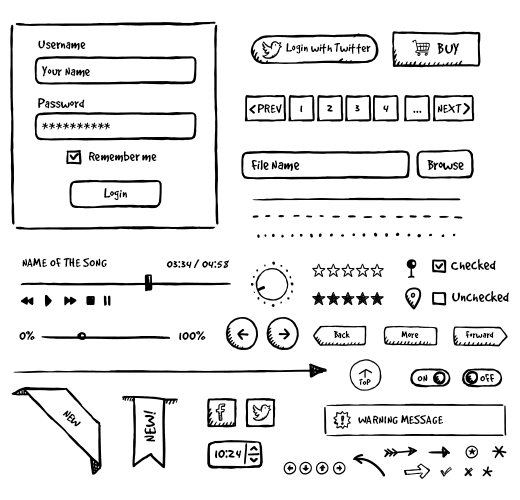
<style>
.page{position:relative;width:520px;height:500px;background:#ffffff}
.page>*{position:absolute;margin:0}
.t1{font:14.5px "GoodDog";color:#000000}
.t2{font:13.2px "GoodDog";letter-spacing:0.01em;color:#000000}
.t3{font:16.6px "GoodDog";letter-spacing:0.01em;color:#000000}
.t4{font:13.8px "GoodDog";letter-spacing:0.01em;color:#000000}
.t5{font:13.8px "GoodDog";letter-spacing:0.05em;color:#000000}
.t6{font:14.5px "GoodDog";letter-spacing:0.1em;color:#000000}
.t7{font:15.9px "GoodDog";color:#000000}
.t8{font:13.6px "GoodDog";letter-spacing:0.01em;color:#000000}
.t9{font:16.1px "GoodDog";letter-spacing:0.01em;color:#000000}
.t10{font:15.3px "GoodDog";color:#000000}
.t11{font:10px "GoodDog";letter-spacing:0.01em;color:#000000}
.t12{font:12px "GoodDog";color:#000000}
.t13{font:8.4px "GoodDog";letter-spacing:0.01em;color:#000000}
.t14{font:19.6px "GoodDog";color:#000000}
</style>
<div class="page">
<p class="t1" style="left:38px;top:40px;width:48px;height:10px">Username</p>
<p class="t2" style="left:286px;top:43px;width:85px;height:11px">Login with Twitter</p>
<p class="t3" style="left:437px;top:43px;width:23px;height:12px">BUY</p>
<p class="t1" style="left:42px;top:66px;width:48px;height:11px">Your Name</p>
<p class="t1" style="left:38px;top:98px;width:47px;height:11px">Password</p>
<p class="t4" style="left:257px;top:104px;width:25px;height:9px">PREV</p>
<p class="t4" style="left:300px;top:105px;width:3px;height:8px">1</p>
<p class="t4" style="left:327px;top:105px;width:6px;height:7px">2</p>
<p class="t4" style="left:355px;top:105px;width:5px;height:7px">3</p>
<p class="t4" style="left:383px;top:105px;width:6px;height:8px">4</p>
<p class="t5" style="left:413px;top:110px;width:9px;height:3px">...</p>
<p class="t4" style="left:437px;top:104px;width:25px;height:9px">NEXT</p>
<p class="t6" style="left:42px;top:122px;width:68px;height:8px">**********</p>
<p class="t1" style="left:89px;top:151px;width:68px;height:11px">Remember me</p>
<p class="t7" style="left:251px;top:160px;width:49px;height:11px">File Name</p>
<p class="t7" style="left:427px;top:160px;width:37px;height:10px">Browse</p>
<p class="t1" style="left:104px;top:188px;width:23px;height:13px">Login</p>
<p class="t8" style="left:22px;top:258px;width:85px;height:10px">NAME OF THE SONG</p>
<p class="t8" style="left:166px;top:259px;width:63px;height:10px">03:34 / 04:58</p>
<p class="t9" style="left:451px;top:259px;width:45px;height:11px">Checked</p>
<p class="t9" style="left:452px;top:291px;width:57px;height:11px">Unchecked</p>
<p class="t10" style="left:19px;top:331px;width:16px;height:9px">0%</p>
<p class="t10" style="left:179px;top:331px;width:27px;height:10px">100%</p>
<p class="t11" style="left:334px;top:331px;width:16px;height:8px">Back</p>
<p class="t11" style="left:401px;top:331px;width:18px;height:8px">More</p>
<p class="t11" style="left:465px;top:331px;width:29px;height:8px">Forward</p>
<p class="t12" style="left:417px;top:374px;width:11px;height:8px">ON</p>
<p class="t12" style="left:480px;top:374px;width:15px;height:8px">OFF</p>
<p class="t13" style="left:359px;top:379px;width:12px;height:6px">TOP</p>
<p class="t1" style="left:62px;top:410px;width:19px;height:17px">NEW</p>
<p class="t14" style="left:143px;top:410px;width:13px;height:32px">NEW!</p>
<p class="t2" style="left:358px;top:415px;width:85px;height:9px">WARNING MESSAGE</p>
<p class="t7" style="left:215px;top:449px;width:27px;height:10px">10:24</p>
</div>
